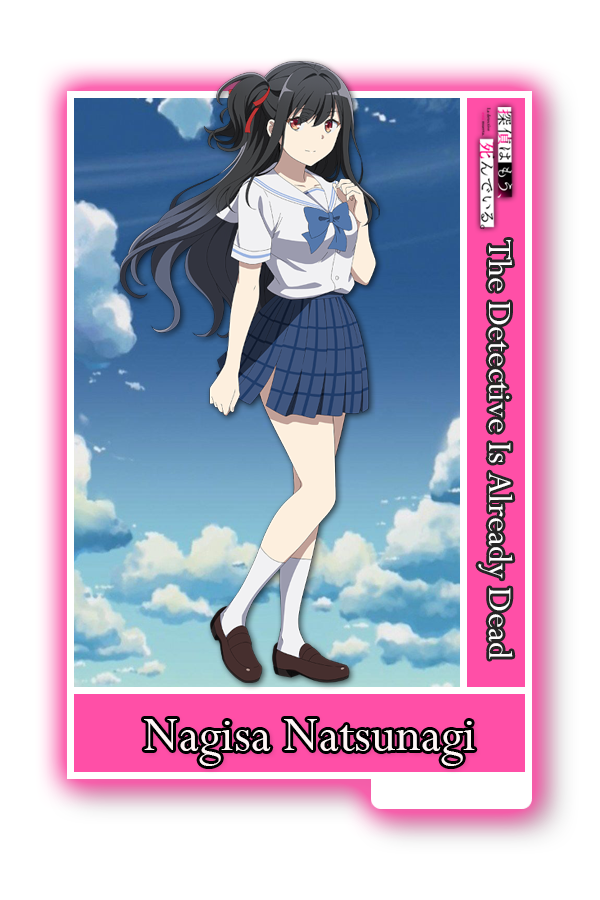
<style>
.page{position:relative;width:600px;height:900px;background:#ffffff}
.page>*{position:absolute;margin:0}
.t1{font:36.5px "Perpetua";color:#ffffff;scale:1.04 1}
.t2{font:54.2px "Perpetua";color:#fff5f5}
</style>
<div class="page">
<p class="t1" style="left:478px;top:240px;width:35px;height:419px;rotate:90deg">The Detective Is Already Dead</p>
<p class="t2" style="left:144px;top:719px;width:331px;height:47px">Nagisa Natsunagi</p>
</div>
